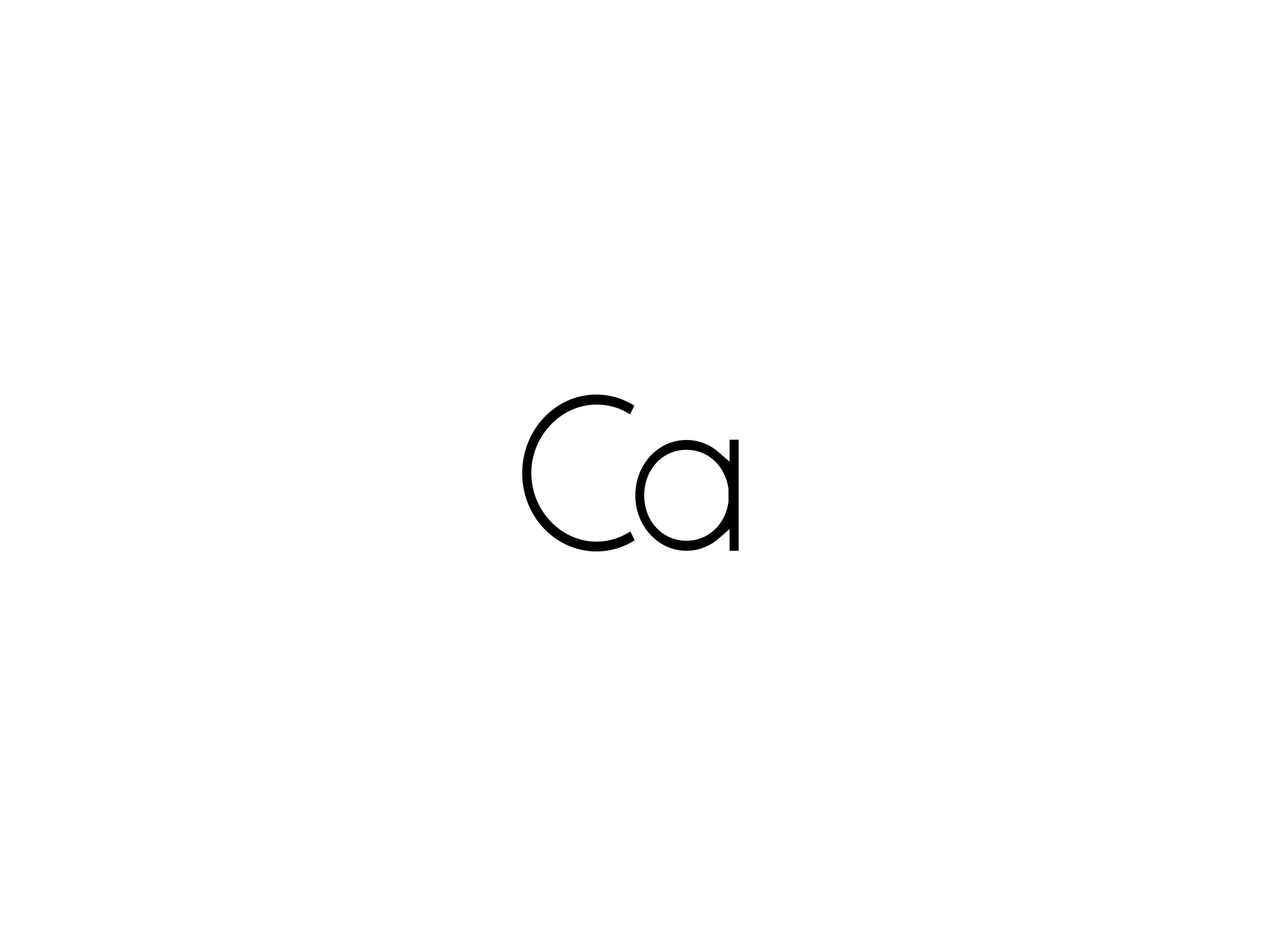
<style>
.page{position:relative;width:1261px;height:946px;background:#ffffff}
.page>*{position:absolute;margin:0}
.t1{font:222.4px "Alcubierre";color:#000000;scale:0.95 1}
</style>
<div class="page">
<p class="t1" style="left:522px;top:394px;width:217px;height:157px">Ca</p>
</div>
